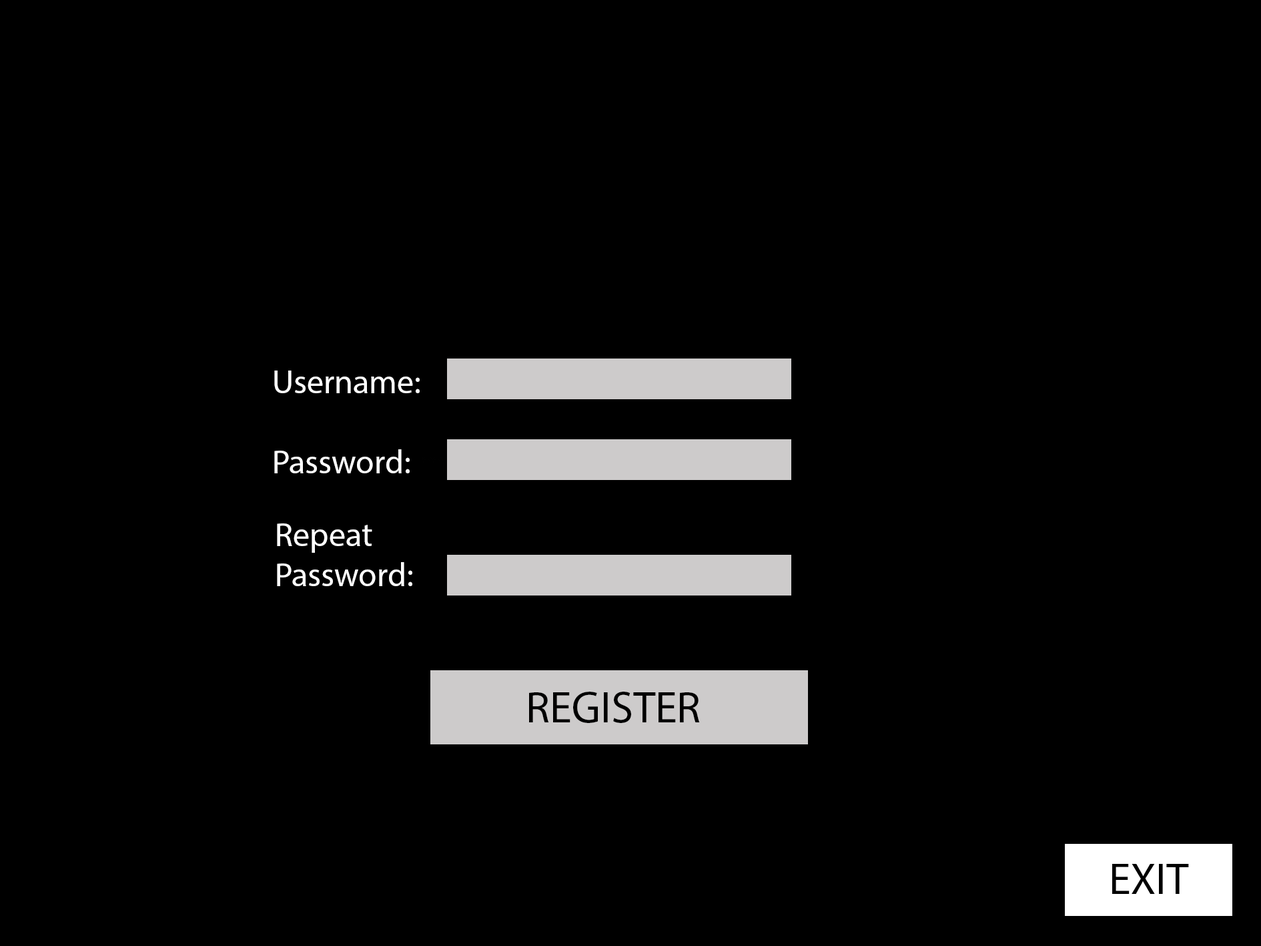
<style>
.page{position:relative;width:1261px;height:946px;background:#000000}
.page>*{position:absolute;margin:0}
.t1{font:33.4px "MyriadPro-Regular";color:#ffffff}
.t2{font:33.4px "MyriadPro-Regular";color:#000000}
.t3{font:44.5px "MyriadPro-Regular";color:#000000}
</style>
<div class="page">
<p class="t1" style="left:274px;top:370px;width:170px;height:103px">Username: <br><br>Password: <span class="t2">m</span></p>
<p class="t1" style="left:277px;top:523px;width:135px;height:63px">Repeat <br>Password:</p>
<p class="t3" style="left:529px;top:691px;width:171px;height:32px">REGISTER</p>
<p class="t3" style="left:1112px;top:863px;width:77px;height:30px">EXIT</p>
</div>
